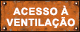
<style>
.page{position:relative;width:80px;height:32px}
.page>*{position:absolute;margin:0}
.t1{font:10px/11px "Arial-BoldMT";letter-spacing:0.04em;color:#ffffff}
</style>
<div class="page">
<p class="t1" style="left:6px;top:5px;width:69px;height:23px;text-align:center">ACESSO À<br>VENTILAÇÃO</p>
</div>
